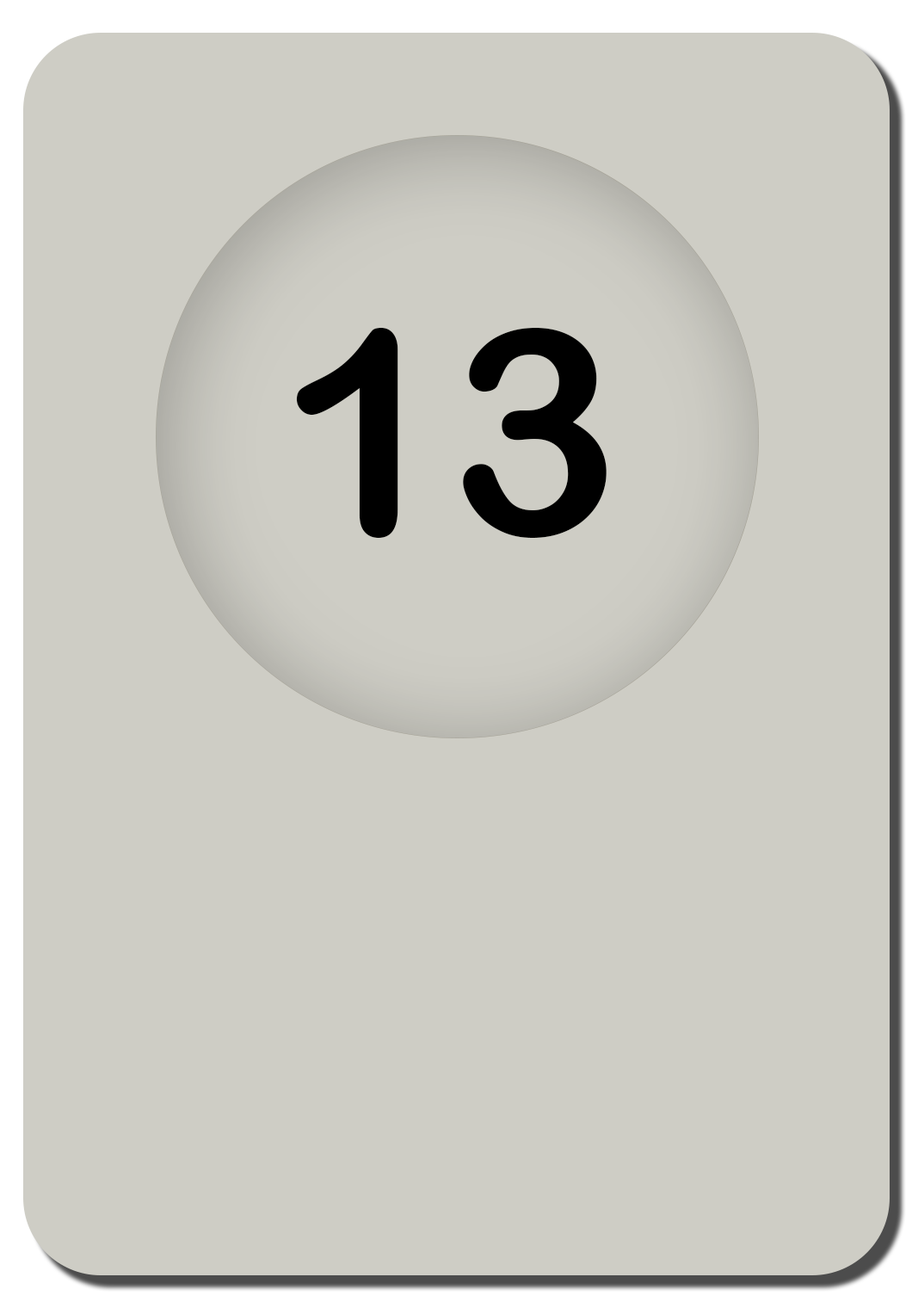
<style>
.page{position:relative;width:912px;height:1308px;background:#cecdc5}
.page>*{position:absolute;margin:0}
.t1{font:286.8px "ArialRoundedMTBold";color:#000000}
</style>
<div class="page">
<p class="t1" style="left:296px;top:328px;width:311px;height:210px">13</p>
</div>
